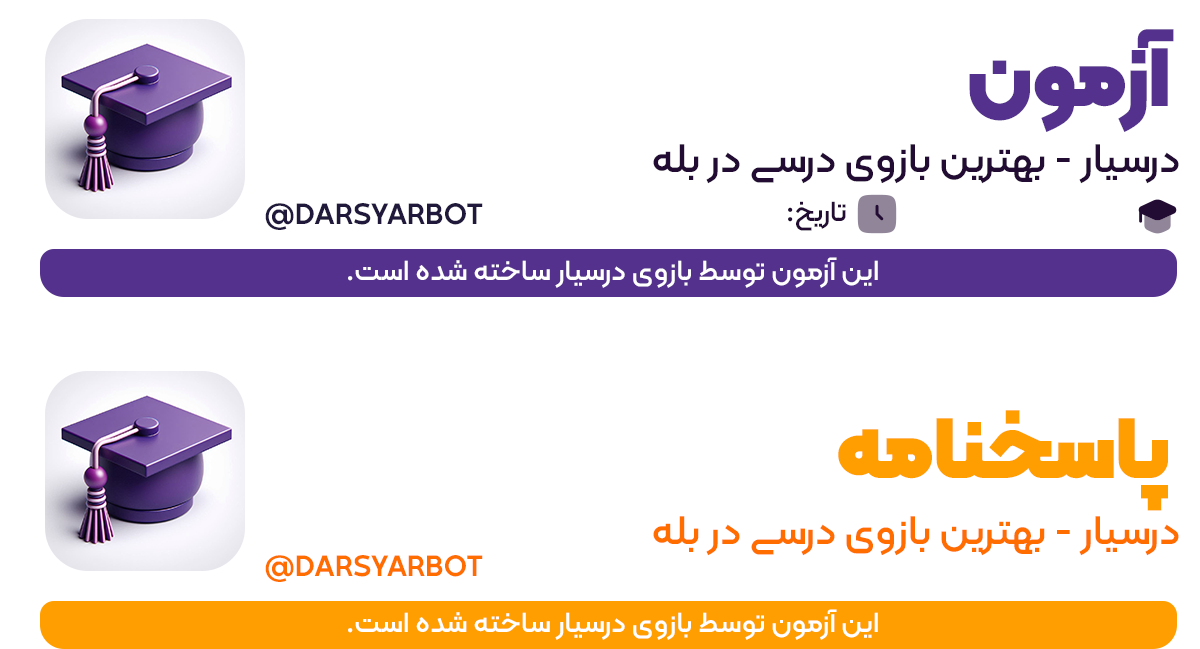
<style>
.page{position:relative;width:1200px;height:649px;background:#ffffff}
.page>*{position:absolute;margin:0}
.t1{font:87.5px "Kalameh-Black";color:#54318c;text-transform:uppercase}
.t2{font:41.7px "Kalameh-Medium";color:#230c33;text-transform:uppercase}
.t3{font:29.2px "Kalameh-SemiBold";color:#21193c;text-transform:uppercase}
.t4{font:29.2px "Kalameh-Medium";color:#230c33;text-transform:uppercase}
.t5{font:29.2px "Kalameh-Medium";color:#ffffff;text-transform:uppercase}
.t6{font:87.5px "Kalameh-Black";color:#ff9e00;text-transform:uppercase}
.t7{font:41.7px "Kalameh-Medium";color:#ff6d00;text-transform:uppercase}
.t8{font:29.2px "Kalameh-SemiBold";color:#ff6d00;text-transform:uppercase}
</style>
<div class="page">
<p class="t1" style="left:969px;top:29px;width:205px;height:103px">آزمون</p>
<p class="t2" style="left:653px;top:144px;width:526px;height:40px">درسیار - بهترین بازوی درسی در بله</p>
<p class="t3" style="left:265px;top:203px;width:218px;height:27px">darsyarbot@</p>
<p class="t4" style="left:788px;top:201px;width:58px;height:30px">تاریخ:</p>
<p class="t5" style="left:348px;top:257px;width:530px;height:31px">این آزمون توسط بازوی درسیار ساخته شده است.</p>
<p class="t6" style="left:838px;top:410px;width:330px;height:101px">پاسخنامه</p>
<p class="t7" style="left:653px;top:516px;width:526px;height:40px">درسیار - بهترین بازوی درسی در بله</p>
<p class="t8" style="left:265px;top:555px;width:218px;height:27px">darsyarbot@</p>
<p class="t5" style="left:348px;top:609px;width:530px;height:31px">این آزمون توسط بازوی درسیار ساخته شده است.</p>
</div>
